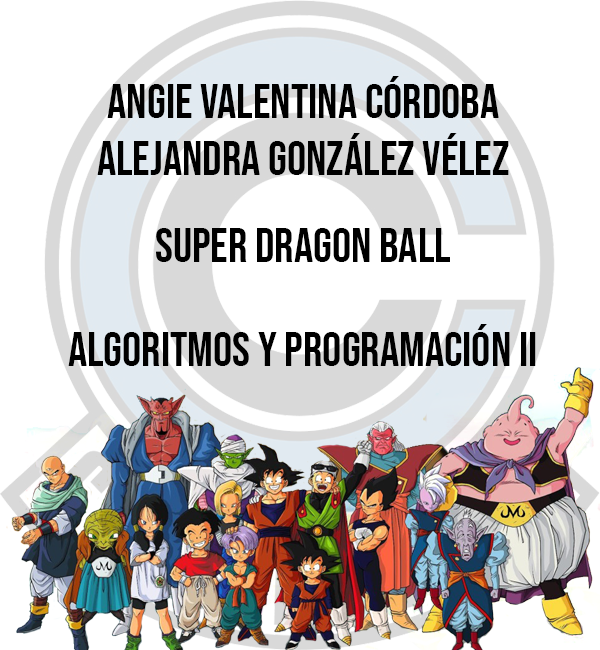
<style>
.page{position:relative;width:600px;height:650px;background:#ffffff}
.page>*{position:absolute;margin:0}
.t1{font:48px "BebasNeue-Regular";color:#000000}
</style>
<div class="page">
<p class="t1" style="left:97px;top:76px;width:412px;height:99px;text-align:center">Angie valentina córdoba<br>Alejandra gonzález vélez</p>
<p class="t1" style="left:156px;top:228px;width:294px;height:34px">super dragon ball</p>
<p class="t1" style="left:68px;top:324px;width:468px;height:42px">algoritmos y programación ii</p>
</div>
